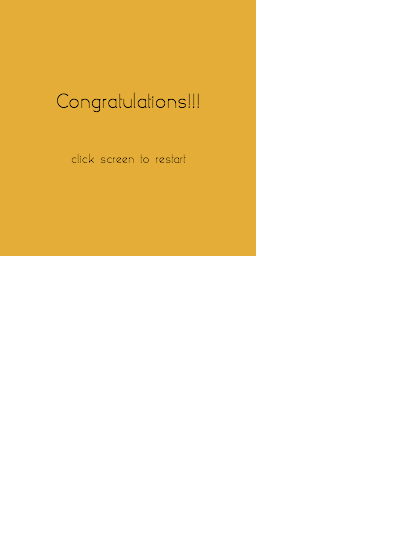
<style>
.page{position:relative;width:400px;height:544px;background:#ffffff}
.page>*{position:absolute;margin:0}
.t1{font:20px "yellowpeasdemo";color:#000000}
.t2{font:12px "yellowpeasdemo";color:#000000}
</style>
<div class="page">
<p class="t1" style="left:57px;top:92px;width:142px;height:21px">Congratulations!!!</p>
<p class="t2" style="left:71px;top:153px;width:115px;height:11px">click screen to restart</p>
</div>
